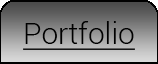
<style>
.page{position:relative;width:158px;height:64px}
.page>*{position:absolute;margin:0}
.t1{font:30px "Roboto-Light";color:#000000;text-decoration:underline}
</style>
<div class="page">
<p class="t1" style="left:23px;top:21px;width:112px;height:29px">Portfolio</p>
</div>
